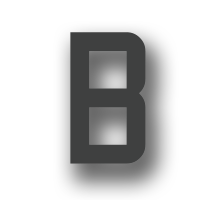
<style>
.page{position:relative;width:215px;height:200px;background:#ffffff}
.page>*{position:absolute;margin:0}
.t1{font:150px "Manteka";color:#3f4040}
</style>
<div class="page">
<p class="t1" style="left:70px;top:32px;width:76px;height:132px">b</p>
</div>
